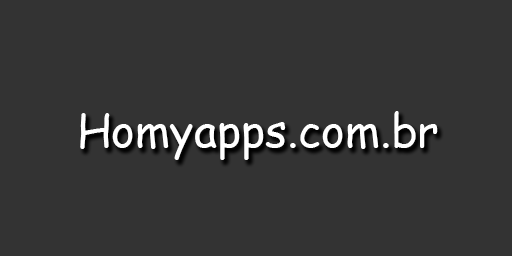
<style>
.page{position:relative;width:512px;height:256px;background:#333333}
.page>*{position:absolute;margin:0}
.t1{font:45px "ComicSansMS";color:#ffffff}
</style>
<div class="page">
<p class="t1" style="left:80px;top:111px;width:358px;height:49px">Homyapps.com.br</p>
</div>
